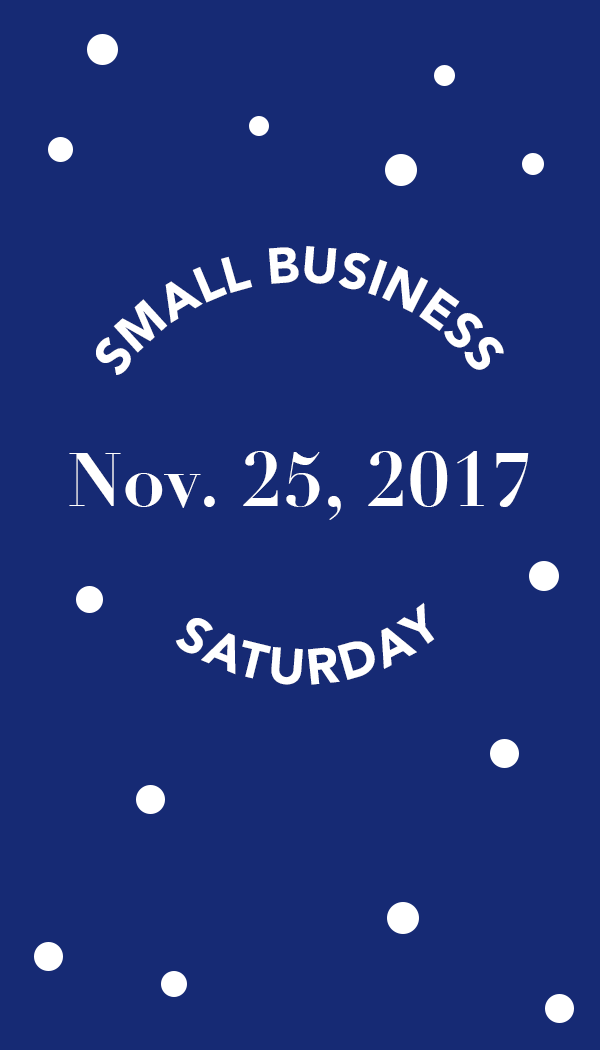
<style>
.page{position:relative;width:600px;height:1050px;background:#162a74}
.page>*{position:absolute;margin:0}
.t1{font:50px "Avenir-Black";color:#ffffff}
.t2{font:75px "Didot-Bold";color:#ffffff}
.t3{font:50px "Avenir-Black";letter-spacing:0.08em;color:#ffffff}
</style>
<div class="page">
<p class="t1" style="left:96px;top:246px;width:408px;height:129px;rotate:19deg">SMALL BUSINESS</p>
<p class="t2" style="left:69px;top:451px;width:460px;height:69px">Nov. 25, 2017</p>
<p class="t3" style="left:175px;top:602px;width:260px;height:83px">SATURDAY</p>
</div>
